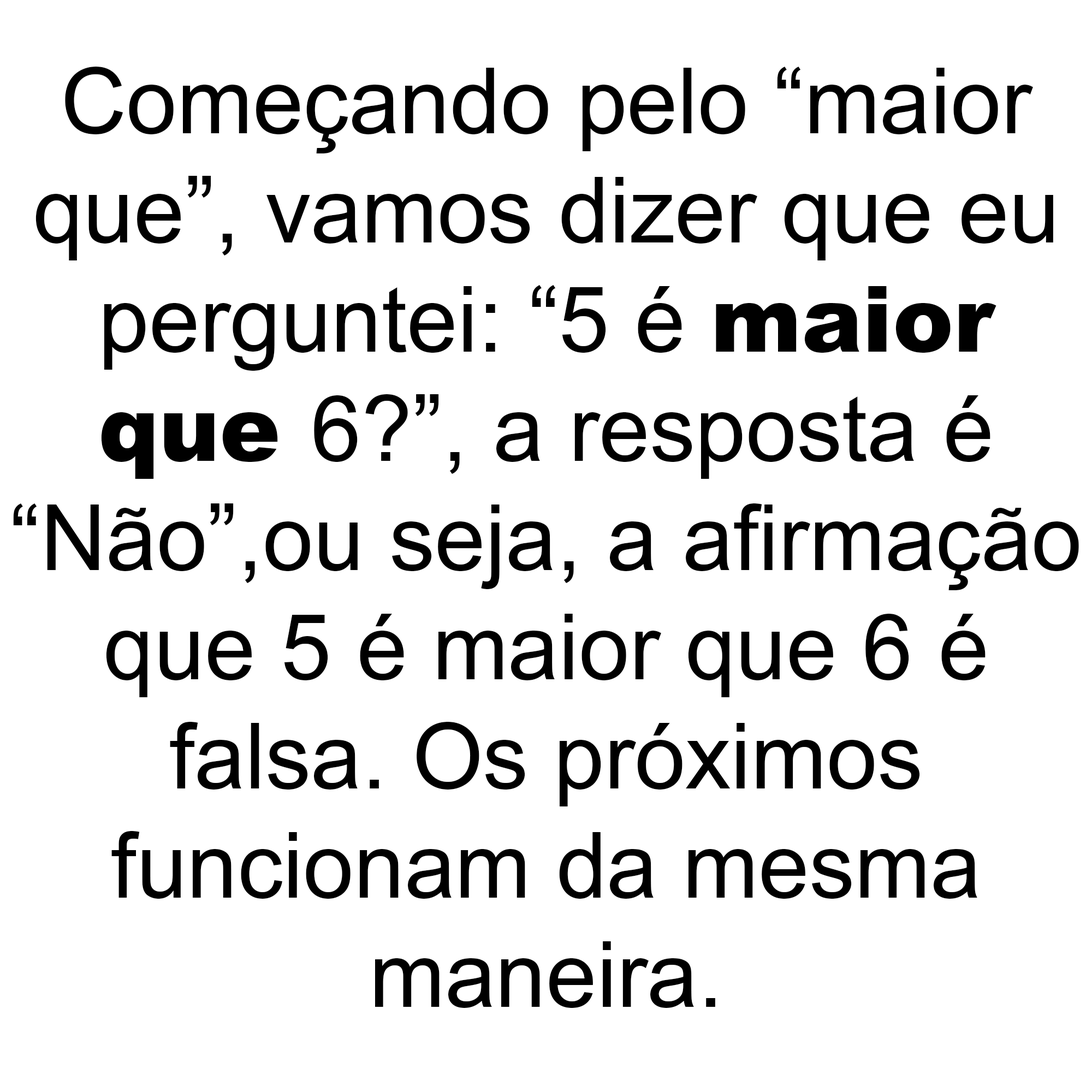
<style>
.page{position:relative;width:1092px;height:1092px;background:#ffffff}
.page>*{position:absolute;margin:0}
.t1{font:91px "ArialMT";color:#000000}
.t2{font:91px "Arial-Black";color:#000000}
</style>
<div class="page">
<p class="t1" style="left:13px;top:67px;width:1066px;height:941px;text-align:center">Começando pelo “maior<br>que”, vamos dizer que eu<br>perguntei: “5 é <span class="t2">maior<br>que </span>6?”, a resposta é<br>“Não”,ou seja, a afirmação<br>que 5 é maior que 6 é<br>falsa. Os próximos<br>funcionam da mesma<br>maneira.</p>
</div>
